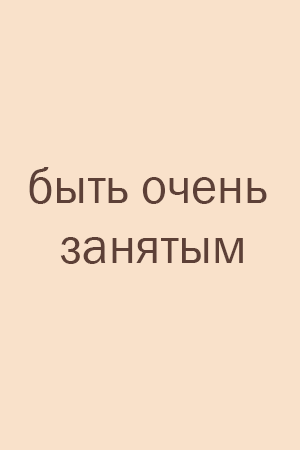
<style>
.page{position:relative;width:300px;height:450px;background:#f9e1ca}
.page>*{position:absolute;margin:0}
.t1{font:50px "FranklinGothic-Book";color:#5d4037}
</style>
<div class="page">
<p class="t1" style="left:29px;top:167px;width:238px;height:97px;text-align:center">быть очень <br>занятым</p>
</div>
